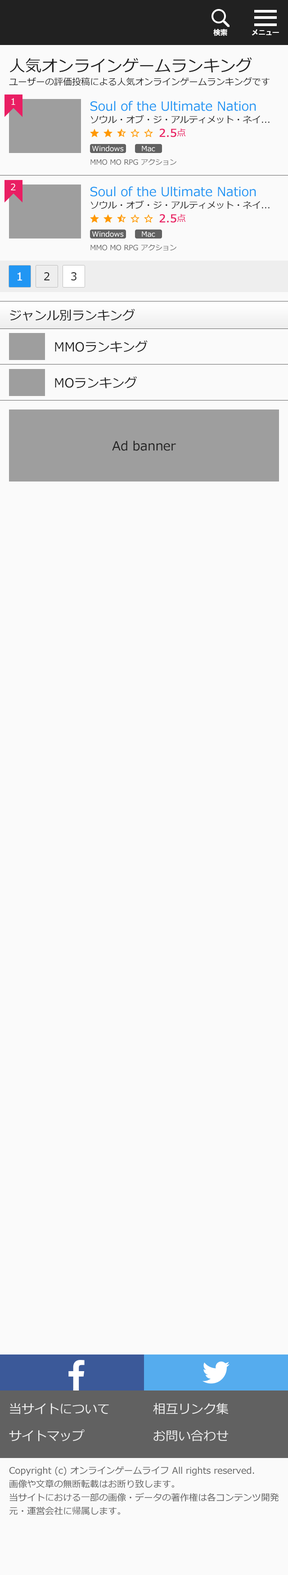
<style>
.page{position:relative;width:288px;height:1575px;background:#fafafa}
.page>*{position:absolute;margin:0}
.t1{font:16.2px "Meiryo";color:#212121}
.t2{font:9px "Meiryo";color:#212121}
.t3{font:9px "Meiryo";color:#ffffff}
.t4{font:12.6px "Meiryo";color:#2196f3}
.t5{font:10.8px "Meiryo";color:#e91e63;font-weight:bold}
.t6{font:9px "Meiryo";color:#e91e63}
.t7{font:7.2px "Meiryo";color:#ffffff}
.t8{font:7.2px "Meiryo";color:#616161}
.t9{font:12.6px "Meiryo";color:#212121}
</style>
<div class="page">
<p class="t1" style="left:10px;top:57px;width:242px;height:15px">人気オンラインゲームランキング</p>
<p class="t2" style="left:9px;top:77px;width:261px;height:9px">ユーザーの評価投稿による人気オンラインゲームランキングです</p>
<p class="t3" style="left:11px;top:98px;width:4px;height:7px">1</p>
<p class="t4" style="left:90px;top:101px;width:166px;height:10px">Soul of the Ultimate Nation</p>
<p class="t2" style="left:90px;top:115px;width:180px;height:9px">ソウル・オブ・ジ・アルティメット・ネイ...</p>
<p class="t5" style="left:159px;top:128px;width:27px;height:9px">2.5<span class="t6">点</span></p>
<p class="t7" style="left:92px;top:145px;width:32px;height:7px">Windows</p>
<p class="t7" style="left:142px;top:146px;width:13px;height:6px">Mac</p>
<p class="t8" style="left:90px;top:159px;width:86px;height:6px">MMO MO RPG アクション</p>
<p class="t3" style="left:11px;top:184px;width:5px;height:6px">2</p>
<p class="t4" style="left:90px;top:186px;width:166px;height:11px">Soul of the Ultimate Nation</p>
<p class="t2" style="left:90px;top:200px;width:180px;height:9px">ソウル・オブ・ジ・アルティメット・ネイ...</p>
<p class="t5" style="left:159px;top:214px;width:27px;height:9px">2.5<span class="t6">点</span></p>
<p class="t7" style="left:92px;top:231px;width:32px;height:6px">Windows</p>
<p class="t7" style="left:142px;top:231px;width:13px;height:6px">Mac</p>
<p class="t8" style="left:90px;top:244px;width:86px;height:7px">MMO MO RPG アクション</p>
<p class="t9" style="left:10px;top:309px;width:125px;height:12px">ジャンル別ランキング</p>
<p class="t9" style="left:55px;top:340px;width:93px;height:12px">MMOランキング</p>
<p class="t9" style="left:55px;top:376px;width:82px;height:12px">MOランキング</p>
<p class="t9" style="left:112px;top:441px;width:64px;height:10px">Ad banner</p>
</div>
